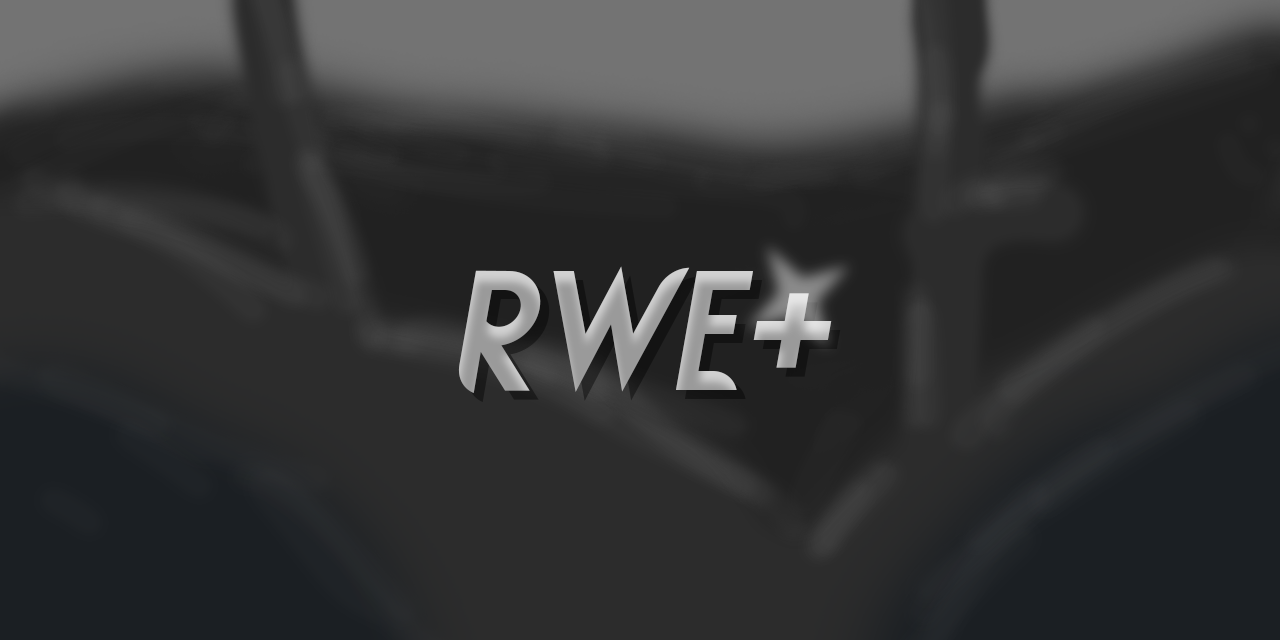
<style>
.page{position:relative;width:1280px;height:640px}
.page>*{position:absolute;margin:0}
.t1{font:200px "Rodondo";color:#9a9a9a;font-style:italic}
</style>
<div class="page">
<p class="t1" style="left:458px;top:266px;width:374px;height:127px">RWE+</p>
</div>
